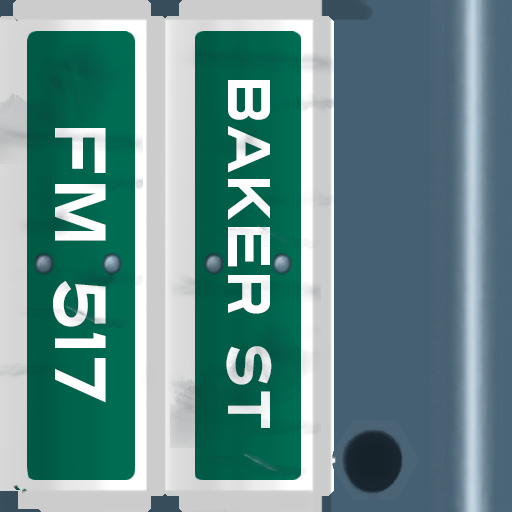
<style>
.page{position:relative;width:512px;height:512px}
.page>*{position:absolute;margin:0}
.t1{font:60px "Turnpike";color:#fefeff;scale:0.75 1}
.t2{font:72px "Turnpike";color:#fefeff;scale:0.75 1}
</style>
<div class="page">
<p class="t1" style="left:226px;top:80px;width:46px;height:348px;rotate:90deg">Baker St</p>
<p class="t2" style="left:53px;top:128px;width:53px;height:275px;rotate:90deg">fm 517</p>
</div>
